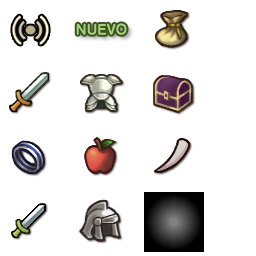
<style>
.page{position:relative;width:256px;height:256px;background:#ffffff}
.page>*{position:absolute;margin:0}
.t1{font:15.1px "Swiss721BT-BoldRounded";color:#a8d183;scale:0.97 1}
</style>
<div class="page">
<p class="t1" style="left:76px;top:23px;width:51px;height:12px">NUEVO</p>
</div>
